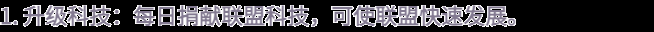
<style>
.page{position:relative;width:654px;height:32px;background:#000000}
.page>*{position:absolute;margin:0}
.t1{font:22px "WebPSD-18463539-0-Regular";color:#837a91;font-weight:bold}
</style>
<div class="page">
<p class="t1" style="left:0px;top:0px;width:654px;height:32px">1. 升级科技：每日捐献联盟科技，可使联盟快速发展。</p>
</div>
